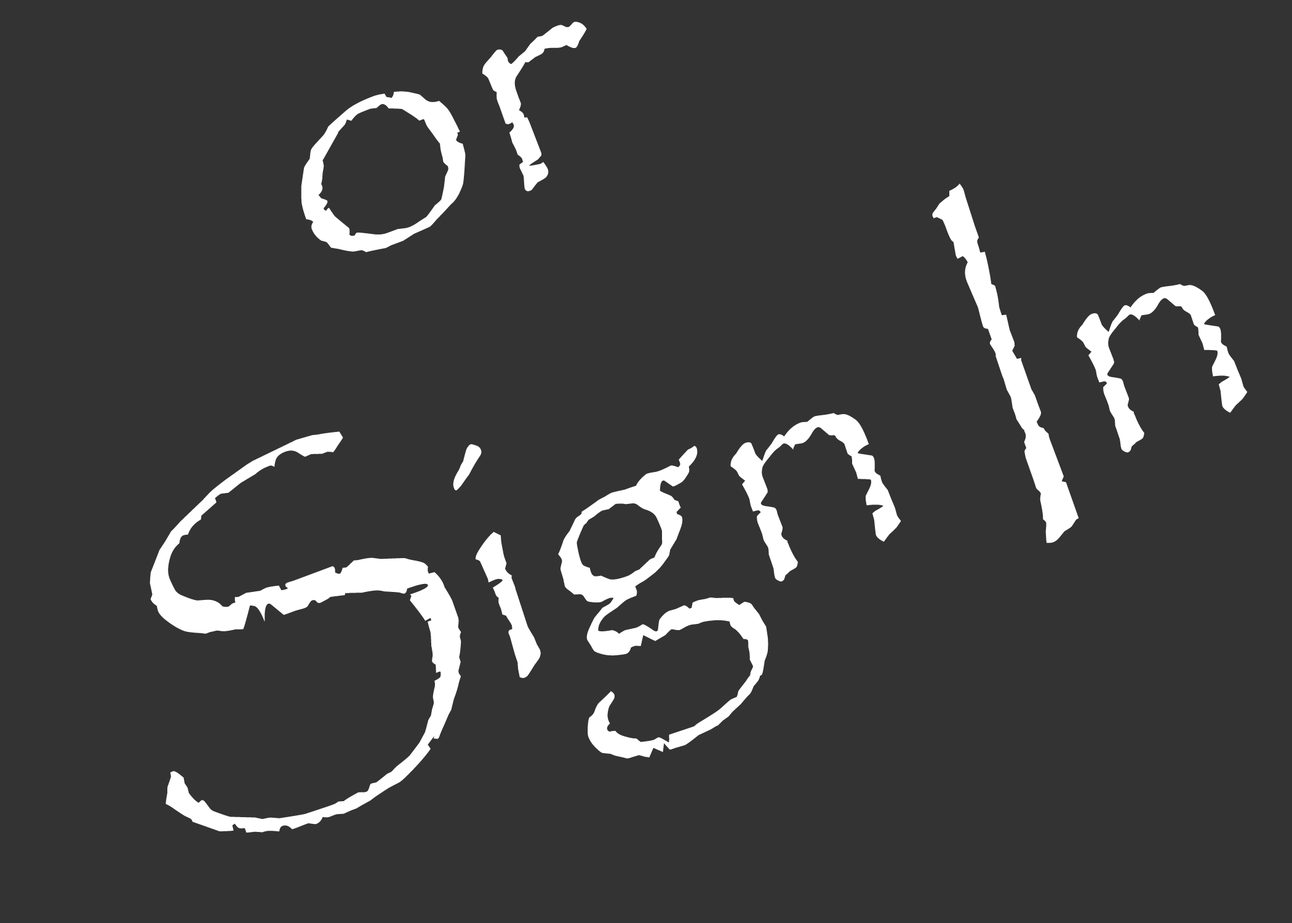
<style>
.page{position:relative;width:1292px;height:923px;background:#333333}
.page>*{position:absolute;margin:0}
.t1{font:377.8px "Papyrus-Regular";color:#ffffff}
</style>
<div class="page">
<p class="t1" style="left:150px;top:22px;width:1098px;height:811px;rotate:-20deg">or<br>Sign In</p>
</div>
